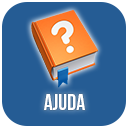
<style>
.page{position:relative;width:128px;height:128px;background:#255c94}
.page>*{position:absolute;margin:0}
.t1{font:22px "BebasNeue";color:#ffffff}
</style>
<div class="page">
<p class="t1" style="left:44px;top:94px;width:41px;height:16px">ajuda</p>
</div>
